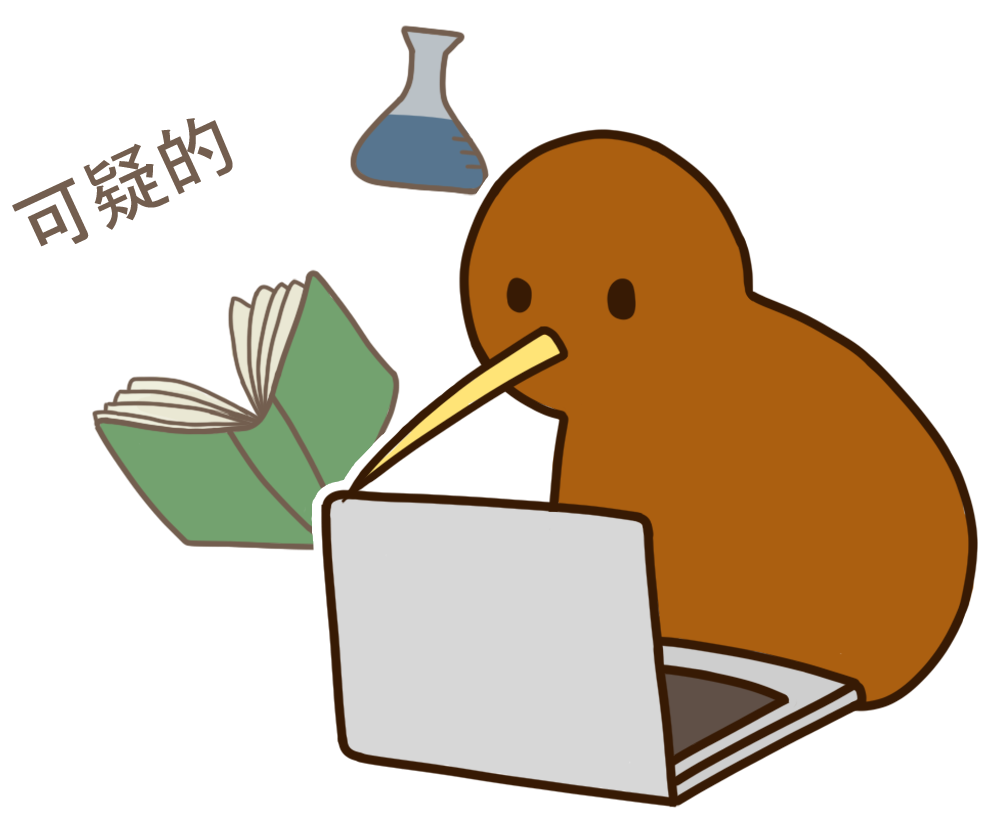
<style>
.page{position:relative;width:1000px;height:840px;background:#ffffff}
.page>*{position:absolute;margin:0}
.t1{font:76.8px "MS-PGothic";color:#735e4f}
</style>
<div class="page">
<p class="t1" style="left:12px;top:118px;width:221px;height:129px;rotate:-25deg">可疑的</p>
</div>
